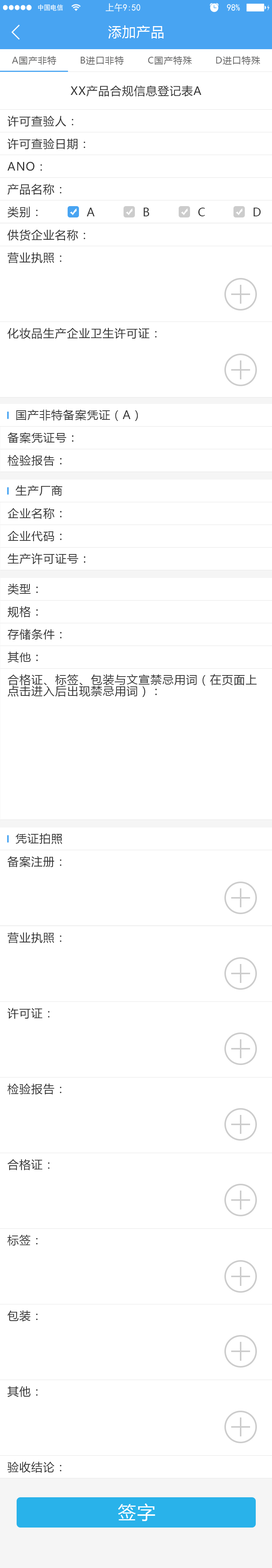
<style>
.page{position:relative;width:272px;height:1568px;background:#ffffff}
.page>*{position:absolute;margin:0}
.t1{font:13.6px "MicrosoftYaHei";letter-spacing:0.05em;color:#ffffff}
.t2{font:9.1px "MicrosoftYaHei";letter-spacing:0.05em;color:#666666}
.t3{font:11.3px "MicrosoftYaHei";letter-spacing:0.05em;color:#333333}
.t4{font:11.3px/11.3px "MicrosoftYaHei";letter-spacing:0.05em;color:#333333}
.t5{font:18.2px "MicrosoftYaHei";letter-spacing:0.05em;color:#ffffff}
</style>
<div class="page">
<p class="t1" style="left:108px;top:25px;width:56px;height:14px">添加产品</p>
<p class="t2" style="left:12px;top:56px;width:44px;height:9px">A国产非特</p>
<p class="t2" style="left:81px;top:56px;width:43px;height:9px">B进口非特</p>
<p class="t2" style="left:148px;top:56px;width:44px;height:9px">C国产特殊</p>
<p class="t2" style="left:216px;top:56px;width:45px;height:9px">D进口特殊</p>
<p class="t3" style="left:71px;top:85px;width:131px;height:11px">XX产品合规信息登记表A</p>
<p class="t3" style="left:8px;top:116px;width:65px;height:11px">许可查验人：</p>
<p class="t3" style="left:8px;top:138px;width:77px;height:12px">许可查验日期：</p>
<p class="t3" style="left:8px;top:162px;width:34px;height:9px">ANO：</p>
<p class="t3" style="left:8px;top:184px;width:54px;height:11px">产品名称：</p>
<p class="t3" style="left:8px;top:206px;width:30px;height:12px">类别：</p>
<p class="t3" style="left:87px;top:208px;width:8px;height:8px">A</p>
<p class="t3" style="left:144px;top:208px;width:5px;height:8px">B</p>
<p class="t3" style="left:199px;top:208px;width:6px;height:8px">C</p>
<p class="t3" style="left:254px;top:208px;width:7px;height:8px">D</p>
<p class="t3" style="left:7px;top:230px;width:78px;height:11px">供货企业名称：</p>
<p class="t3" style="left:8px;top:252px;width:54px;height:11px">营业执照：</p>
<p class="t3" style="left:8px;top:328px;width:149px;height:11px">化妆品生产企业卫生许可证：</p>
<p class="t3" style="left:16px;top:410px;width:122px;height:11px">国产非特备案凭证（A）</p>
<p class="t3" style="left:8px;top:432px;width:66px;height:11px">备案凭证号：</p>
<p class="t3" style="left:8px;top:455px;width:54px;height:11px">检验报告：</p>
<p class="t3" style="left:16px;top:485px;width:46px;height:11px">生产厂商</p>
<p class="t3" style="left:8px;top:508px;width:54px;height:11px">企业名称：</p>
<p class="t3" style="left:8px;top:531px;width:54px;height:10px">企业代码：</p>
<p class="t3" style="left:8px;top:553px;width:77px;height:11px">生产许可证号：</p>
<p class="t3" style="left:8px;top:584px;width:30px;height:11px">类型：</p>
<p class="t3" style="left:8px;top:606px;width:30px;height:12px">规格：</p>
<p class="t3" style="left:8px;top:629px;width:54px;height:11px">存储条件：</p>
<p class="t3" style="left:8px;top:652px;width:30px;height:11px">其他：</p>
<p class="t4" style="left:8px;top:674px;width:249px;height:23px">合格证、标签、包装与文宣禁忌用词（在页面上<br>点击进入后出现禁忌用词）：</p>
<p class="t3" style="left:16px;top:833px;width:46px;height:11px">凭证拍照</p>
<p class="t3" style="left:7px;top:856px;width:55px;height:11px">备案注册：</p>
<p class="t3" style="left:8px;top:932px;width:54px;height:11px">营业执照：</p>
<p class="t3" style="left:8px;top:1008px;width:42px;height:11px">许可证：</p>
<p class="t3" style="left:8px;top:1084px;width:54px;height:10px">检验报告：</p>
<p class="t3" style="left:8px;top:1159px;width:42px;height:11px">合格证：</p>
<p class="t3" style="left:7px;top:1235px;width:31px;height:11px">标签：</p>
<p class="t3" style="left:7px;top:1310px;width:31px;height:11px">包装：</p>
<p class="t3" style="left:8px;top:1386px;width:30px;height:11px">其他：</p>
<p class="t3" style="left:7px;top:1461px;width:55px;height:12px">验收结论：</p>
<p class="t5" style="left:118px;top:1503px;width:37px;height:18px">签字</p>
</div>
